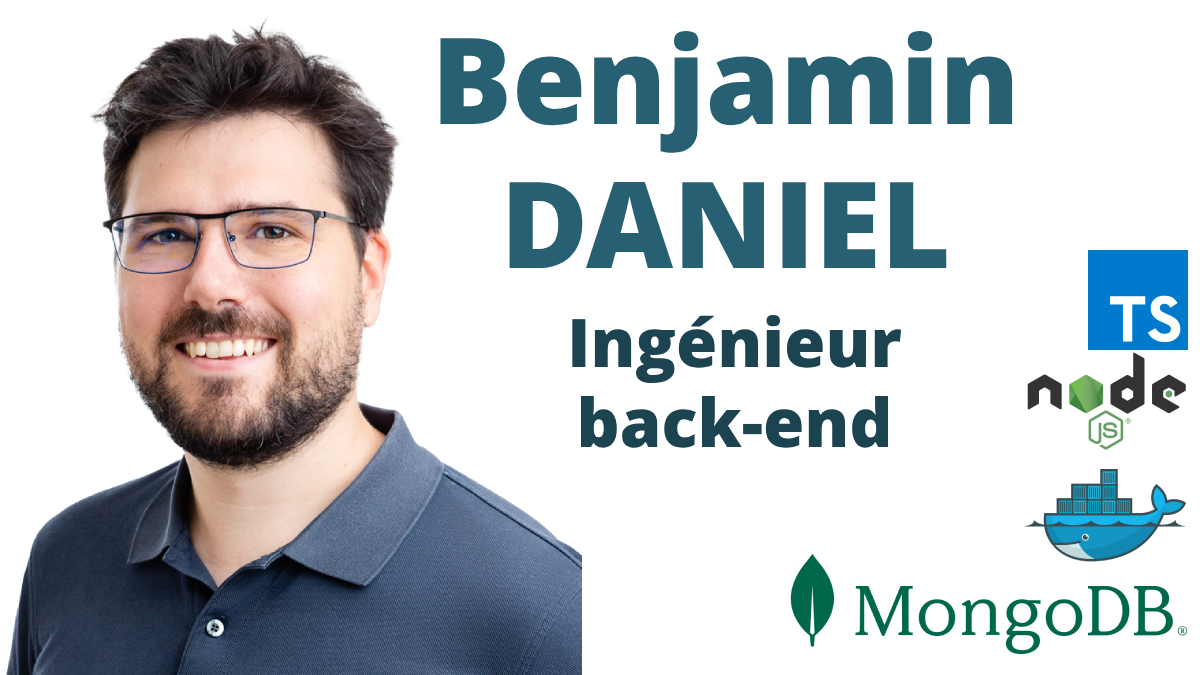
<style>
.page{position:relative;width:1200px;height:675px;background:#ffffff}
.page>*{position:absolute;margin:0}
.t1{font:120px "OpenSans-Extrabold";color:#276072}
.t2{font:67px "OpenSans-Extrabold";color:#1b4350}
</style>
<div class="page">
<p class="t1" style="left:440px;top:30px;width:573px;height:238px;text-align:center">Benjamin<br>DANIEL</p>
<p class="t2" style="left:572px;top:315px;width:330px;height:133px;text-align:center">Ingénieur<br>back-end</p>
</div>
